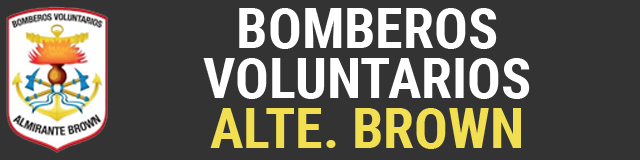
<style>
.page{position:relative;width:640px;height:160px;background:#333333}
.page>*{position:absolute;margin:0}
.t1{font:56px/50px "RobotoCondensed-Bold";color:#ffffff;text-transform:uppercase}
.t2{font:56px/50px "RobotoCondensed-Bold";color:#f1de51;text-transform:uppercase}
</style>
<div class="page">
<p class="t1" style="left:203px;top:8px;width:327px;height:141px;text-align:center">BOMBEROS<br>VOLUNTARIOS<br><span class="t2">ALTE. BROWN</span></p>
</div>
